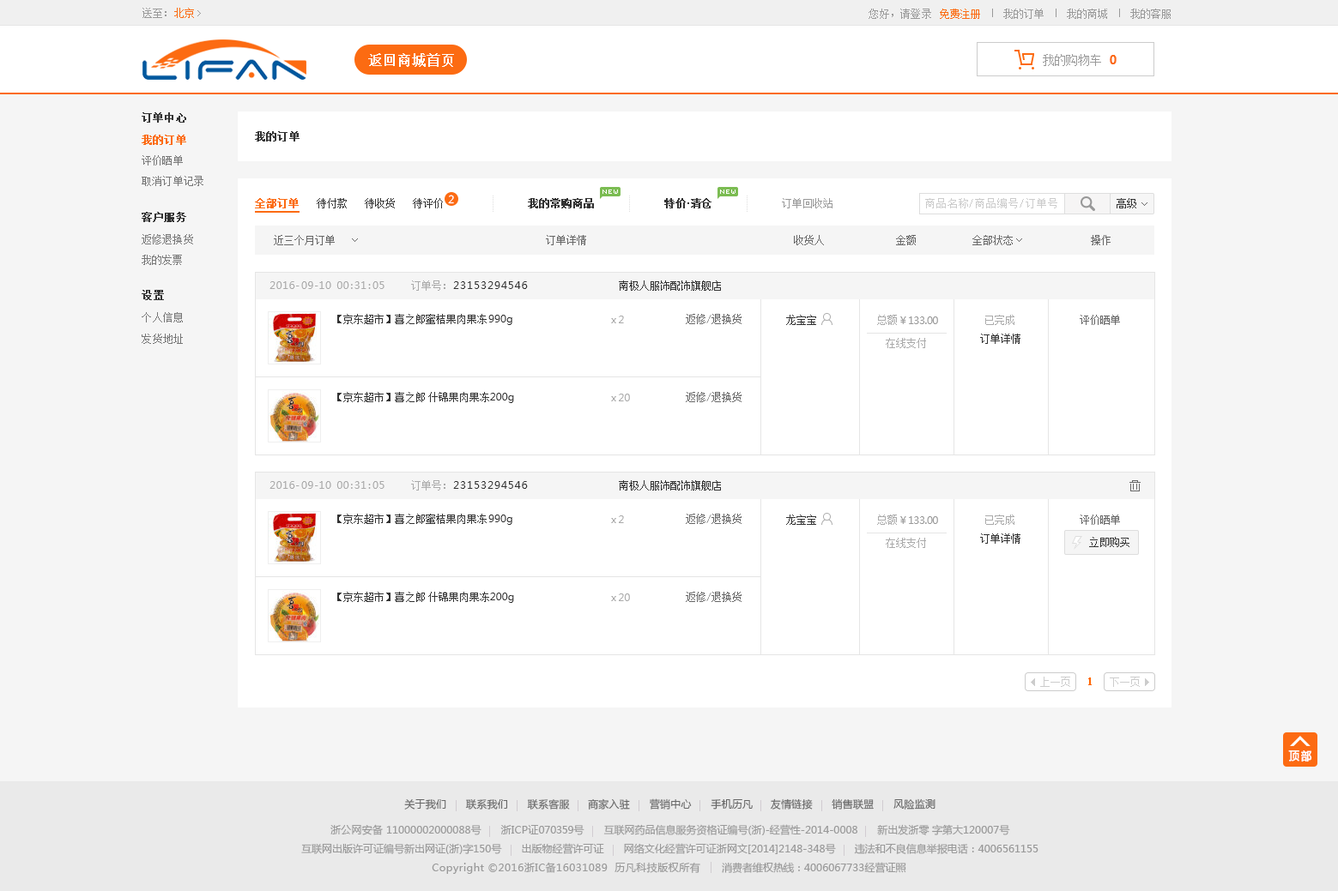
<style>
.page{position:relative;width:1338px;height:891px;background:#ffffff}
.page>*{position:absolute;margin:0}
.t1{font:10.1px "SimSun";letter-spacing:0.02em;color:#999999}
.t2{font:10.1px "SimSun";letter-spacing:0.02em;color:#fc6b12}
.t3{font:10.6px "SimSun";letter-spacing:0.02em;color:#999999}
.t4{font:10.6px "SimSun";letter-spacing:0.02em;color:#fc6b12}
.t5{font:13.7px "SimSun";color:#ffffff;font-weight:bold}
.t6{font:12px "SimSun";letter-spacing:-0.06em;color:#999999}
.t7{font:12px "MicrosoftYaHei-Bold";letter-spacing:-0.06em;color:#fc6b12}
.t8{font:10.3px "SimSun";color:#333333;font-weight:bold}
.t9{font:10.3px "SimSun";color:#fc6b12;font-weight:bold}
.t10{font:10.3px "SimSun";color:#777777}
.t11{font:10.3px "MicrosoftYaHei";color:#ffffff}
.t12{font:10.3px "SimSun";color:#333333}
.t13{font:10.3px "SimSun";letter-spacing:-0.02em;color:#333333;font-weight:bold}
.t14{font:10.3px "SimSun";color:#999999}
.t15{font:10.3px "SimSun";letter-spacing:0.08em;color:#cccccc}
.t16{font:10.3px "SimSun";letter-spacing:-0.02em;color:#333333}
.t17{font:10.4px "SimSun";color:#333333;font-weight:bold}
.t18{font:10.4px "SimSun";color:#777777}
.t19{font:10.3px "SimSun";color:#666666}
.t20{font:10.6px "SimSun";color:#666666}
.t21{font:10.3px "MicrosoftYaHei";letter-spacing:0.04em;color:#aaaaaa}
.t22{font:10.3px "SimSun";color:#aaaaaa}
.t23{font:10.3px "MicrosoftYaHei";letter-spacing:0.08em;color:#333333}
.t24{font:10.3px "MicrosoftYaHei";color:#333333}
.t25{font:10.3px "MicrosoftYaHei";color:#aaaaaa}
.t26{font:10.3px "MicrosoftYaHei";letter-spacing:-0.04em;color:#999999}
.t27{font:10.3px "SimSun";color:#cccccc}
.t28{font:11.1px "SimSun";color:#ff6600;font-weight:bold}
.t29{font:11.3px "MicrosoftYaHei";color:#ffffff;font-weight:bold;scale:0.91 1}
.t30{font:10.3px "MicrosoftYaHei";letter-spacing:0.02em;color:#666666}
.t31{font:10.3px "MicrosoftYaHei";color:#999999}
.t32{font:10.3px "MicrosoftYaHei";letter-spacing:0.02em;color:#999999}
.t33{font:10.3px "MicrosoftYaHei";letter-spacing:-0.02em;color:#999999}
.t34{font:10.3px "MicrosoftYaHei";letter-spacing:0.04em;color:#999999}
</style>
<div class="page">
<p class="t1" style="left:142px;top:8px;width:52px;height:10px">送至：<span class="t2">北京</span></p>
<p class="t3" style="left:868px;top:9px;width:63px;height:10px">您好，请登录</p>
<p class="t4" style="left:940px;top:9px;width:40px;height:10px">免费注册</p>
<p class="t3" style="left:1003px;top:9px;width:40px;height:10px">我的订单</p>
<p class="t3" style="left:1066px;top:9px;width:41px;height:10px">我的商城</p>
<p class="t3" style="left:1130px;top:9px;width:40px;height:10px">我的客服</p>
<p class="t5" style="left:368px;top:53px;width:86px;height:14px">返回商城首页</p>
<p class="t6" style="left:1042px;top:54px;width:59px;height:12px">我的购物车</p>
<p class="t7" style="left:1109px;top:55px;width:7px;height:9px">0</p>
<p class="t8" style="left:142px;top:112px;width:44px;height:11px">订单中心</p>
<p class="t9" style="left:142px;top:135px;width:44px;height:10px">我的订单</p>
<p class="t8" style="left:255px;top:131px;width:44px;height:11px">我的订单</p>
<p class="t10" style="left:142px;top:155px;width:41px;height:11px">评价晒单</p>
<p class="t10" style="left:142px;top:176px;width:61px;height:10px">取消订单记录</p>
<p class="t11" style="left:448px;top:195px;width:6px;height:9px">2</p>
<p class="t9" style="left:255px;top:198px;width:44px;height:10px">全部订单</p>
<p class="t12" style="left:317px;top:198px;width:30px;height:10px">待付款</p>
<p class="t12" style="left:365px;top:198px;width:30px;height:10px">待收货</p>
<p class="t12" style="left:413px;top:198px;width:30px;height:10px">待评价</p>
<p class="t13" style="left:528px;top:198px;width:66px;height:10px">我的常购商品</p>
<p class="t13" style="left:664px;top:198px;width:47px;height:10px">特价 清仓</p>
<p class="t14" style="left:782px;top:198px;width:50px;height:10px">订单回收站</p>
<p class="t15" style="left:925px;top:198px;width:132px;height:10px">商品名称/商品编号/订单号</p>
<p class="t16" style="left:1116px;top:198px;width:20px;height:10px">高级</p>
<p class="t17" style="left:142px;top:212px;width:44px;height:10px">客户服务</p>
<p class="t18" style="left:142px;top:234px;width:51px;height:11px">返修退换货</p>
<p class="t19" style="left:274px;top:235px;width:61px;height:10px">近三个月订单</p>
<p class="t19" style="left:546px;top:235px;width:40px;height:10px">订单详情</p>
<p class="t19" style="left:794px;top:235px;width:30px;height:10px">收货人</p>
<p class="t19" style="left:896px;top:235px;width:19px;height:10px">金额</p>
<p class="t20" style="left:972px;top:235px;width:40px;height:10px">全部状态</p>
<p class="t19" style="left:1091px;top:235px;width:19px;height:10px">操作</p>
<p class="t18" style="left:142px;top:255px;width:40px;height:10px">我的发票</p>
<p class="t21" style="left:269px;top:281px;width:115px;height:8px">2016-09-10 00:31:05</p>
<p class="t22" style="left:411px;top:281px;width:34px;height:10px">订单号：</p>
<p class="t23" style="left:453px;top:281px;width:75px;height:8px">23153294546</p>
<p class="t12" style="left:619px;top:281px;width:102px;height:10px">南极人服饰配饰旗舰店</p>
<p class="t17" style="left:142px;top:290px;width:22px;height:10px">设置</p>
<p class="t18" style="left:142px;top:312px;width:41px;height:11px">个人信息</p>
<p class="t12" style="left:337px;top:314px;width:175px;height:11px">【京东超市】喜之郎蜜桔果肉果冻<span class="t24">990g</span></p>
<p class="t25" style="left:611px;top:316px;width:13px;height:7px">x 2</p>
<p class="t19" style="left:686px;top:314px;width:55px;height:10px">返修/退换货</p>
<p class="t12" style="left:786px;top:315px;width:30px;height:10px">龙宝宝</p>
<p class="t22" style="left:877px;top:315px;width:20px;height:10px">总额</p>
<p class="t26" style="left:900px;top:317px;width:38px;height:7px">￥133.00</p>
<p class="t22" style="left:985px;top:315px;width:29px;height:10px">已完成</p>
<p class="t19" style="left:1079px;top:315px;width:41px;height:10px">评价晒单</p>
<p class="t18" style="left:142px;top:334px;width:41px;height:10px">发货地址</p>
<p class="t22" style="left:885px;top:338px;width:41px;height:10px">在线支付</p>
<p class="t12" style="left:980px;top:334px;width:40px;height:10px">订单详情</p>
<p class="t12" style="left:337px;top:392px;width:177px;height:11px">【京东超市】喜之郎 什锦果肉果冻<span class="t24">200g</span></p>
<p class="t25" style="left:611px;top:394px;width:19px;height:8px">x 20</p>
<p class="t19" style="left:686px;top:392px;width:55px;height:10px">返修/退换货</p>
<p class="t21" style="left:269px;top:481px;width:115px;height:8px">2016-09-10 00:31:05</p>
<p class="t22" style="left:411px;top:480px;width:34px;height:11px">订单号：</p>
<p class="t23" style="left:453px;top:481px;width:75px;height:8px">23153294546</p>
<p class="t12" style="left:619px;top:480px;width:102px;height:11px">南极人服饰配饰旗舰店</p>
<p class="t12" style="left:337px;top:514px;width:175px;height:11px">【京东超市】喜之郎蜜桔果肉果冻<span class="t24">990g</span></p>
<p class="t25" style="left:611px;top:516px;width:13px;height:7px">x 2</p>
<p class="t19" style="left:686px;top:514px;width:55px;height:10px">返修/退换货</p>
<p class="t12" style="left:786px;top:515px;width:30px;height:10px">龙宝宝</p>
<p class="t22" style="left:877px;top:515px;width:20px;height:10px">总额</p>
<p class="t26" style="left:900px;top:517px;width:38px;height:7px">￥133.00</p>
<p class="t22" style="left:985px;top:515px;width:29px;height:10px">已完成</p>
<p class="t19" style="left:1079px;top:515px;width:41px;height:10px">评价晒单</p>
<p class="t12" style="left:980px;top:534px;width:40px;height:10px">订单详情</p>
<p class="t22" style="left:885px;top:538px;width:41px;height:10px">在线支付</p>
<p class="t12" style="left:1089px;top:537px;width:40px;height:10px">立即购买</p>
<p class="t12" style="left:337px;top:592px;width:177px;height:11px">【京东超市】喜之郎 什锦果肉果冻<span class="t24">200g</span></p>
<p class="t25" style="left:611px;top:594px;width:19px;height:7px">x 20</p>
<p class="t19" style="left:686px;top:592px;width:55px;height:10px">返修/退换货</p>
<p class="t27" style="left:1040px;top:677px;width:30px;height:10px">上一页</p>
<p class="t28" style="left:1088px;top:678px;width:3px;height:8px">1</p>
<p class="t27" style="left:1109px;top:677px;width:30px;height:10px">下一页</p>
<p class="t29" style="left:1288px;top:751px;width:24px;height:12px">顶 部</p>
<p class="t30" style="left:404px;top:799px;width:531px;height:11px">关于我们      联系我们      联系客服     商家入驻      营销中心      手机历凡     友情链接      销售联盟      风险监测</p>
<p class="t31" style="left:330px;top:825px;width:680px;height:11px"><span class="t32">浙公网安备 </span>11000002000088<span class="t32">号      浙ICP证</span><span class="t33">070359号     </span>互联网药品信息服务资格证编号(<span class="t32">浙</span>)-经营性-2014-0008      新出发<span class="t32">浙</span>零 字第大120007号</p>
<p class="t31" style="left:301px;top:843px;width:737px;height:12px">互联网出版许可证编号新出网证(<span class="t32">浙</span>)字150号       出版物经营许可证       网络文化经营许可证<span class="t32">浙</span>网文[2014]2148-348号       违法和不良信息举报电话：4006561155</p>
<p class="t34" style="left:432px;top:862px;width:474px;height:12px"><span class="t31"><br><br></span>Copyright ©2016浙IC备16031089  历凡科技版权所有<span class="t31">       消费者维权热线：4006067733经营证照</span></p>
</div>
